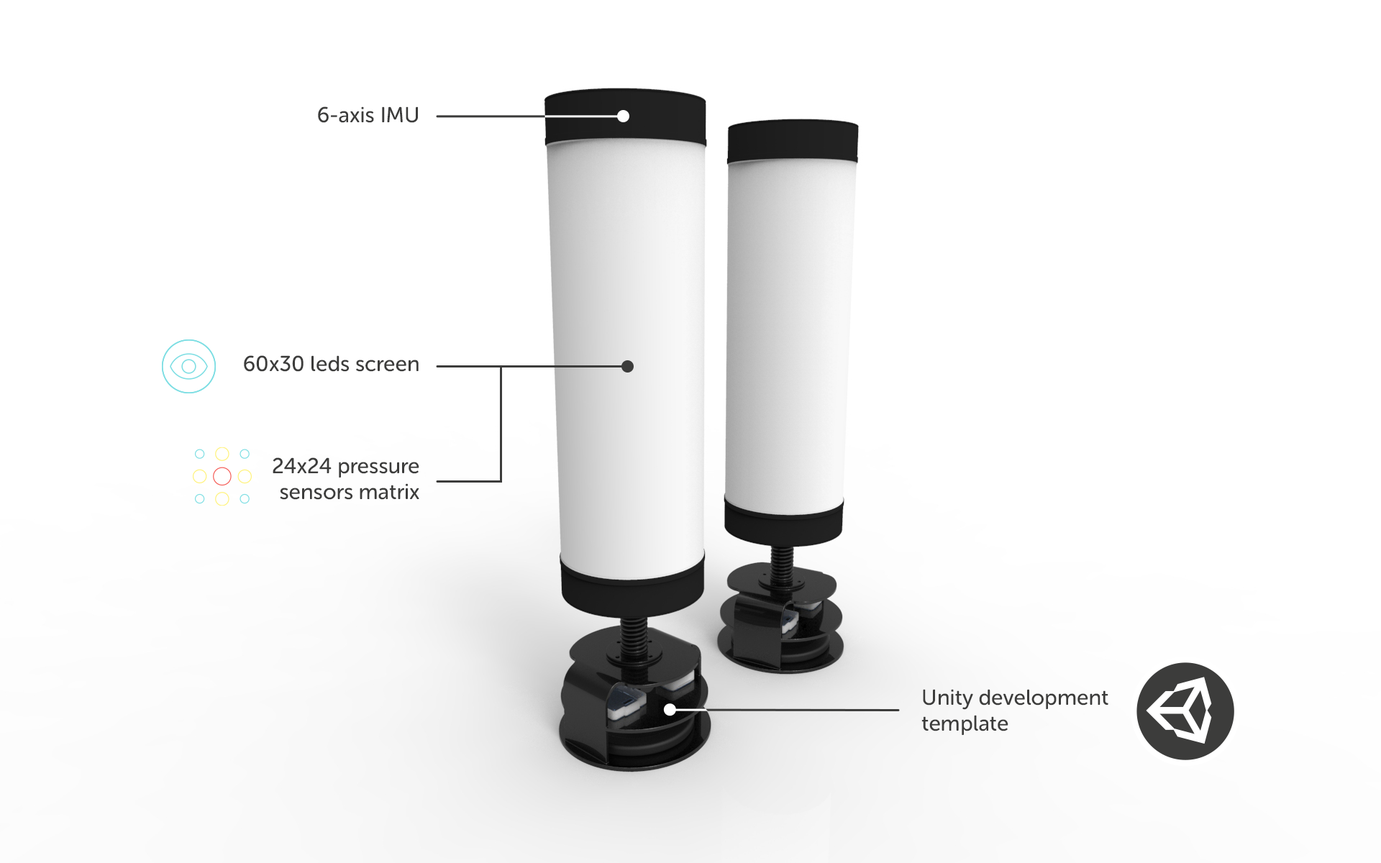
<style>
.page{position:relative;width:1381px;height:863px;background:#ffffff}
.page>*{position:absolute;margin:0}
.t1{font:21.6px "MuseoSansW01-Rounded500";color:#3c3c3b}
</style>
<div class="page">
<p class="t1" style="left:318px;top:106px;width:100px;height:17px">6-axis IMU</p>
<p class="t1" style="left:244px;top:355px;width:175px;height:17px">60x30 leds screen</p>
<p class="t1" style="left:273px;top:458px;width:146px;height:42px;text-align:right">24x24 pressure sensors matrix</p>
<p class="t1" style="left:922px;top:689px;width:187px;height:46px">Unity development template</p>
</div>
